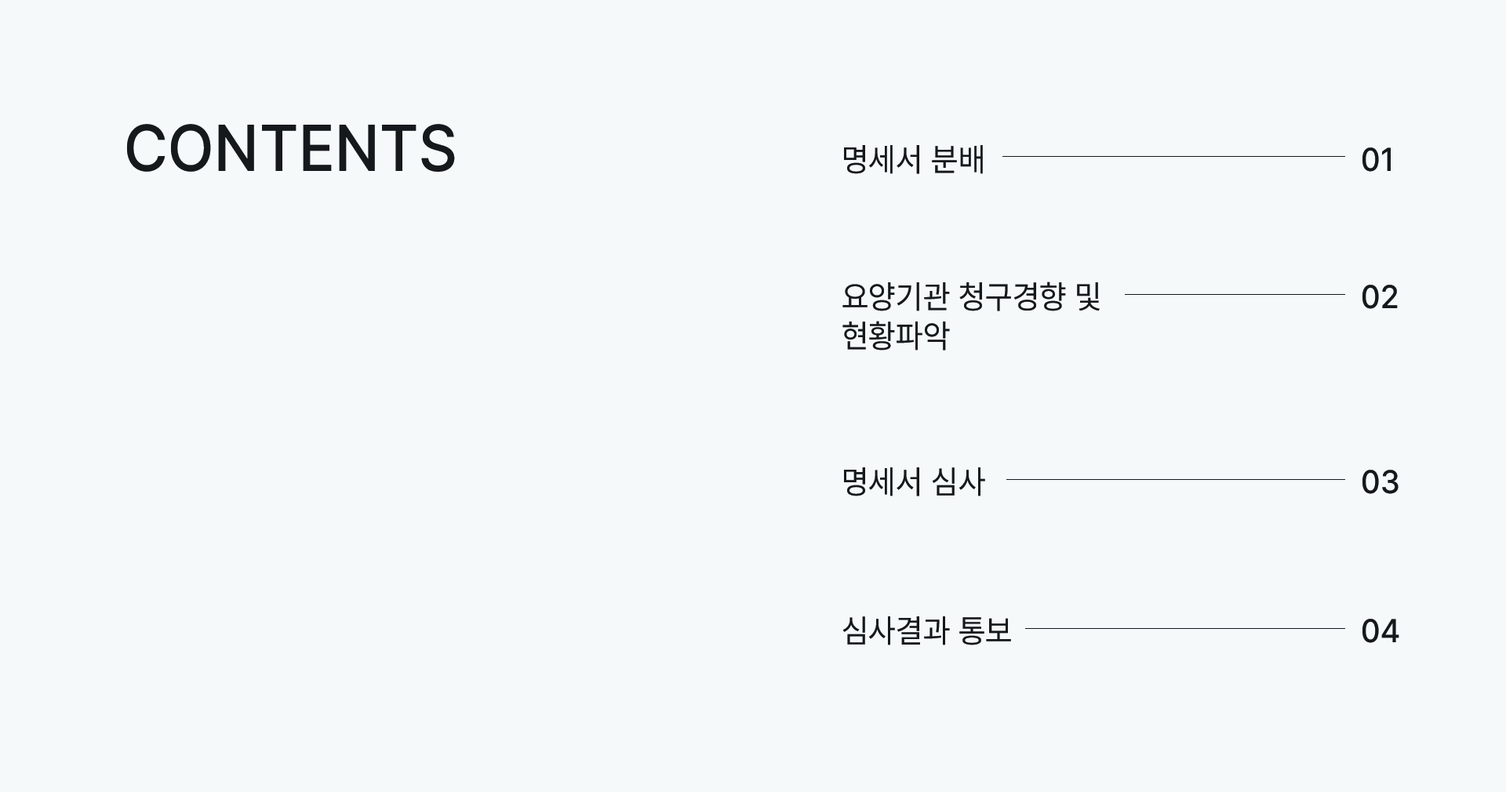
<style>
.page{position:relative;width:1506px;height:792px;background:#f6f9f9}
.page>*{position:absolute;margin:0}
.t1{font:65.3px "Pretendard-Medium";letter-spacing:0.01em;color:#14191c;scale:0.95 1}
.t2{font:32.7px "Pretendard-Regular";letter-spacing:0.01em;color:#14191c;scale:0.95 1}
.t3{font:32.7px "Pretendard-Medium";letter-spacing:0.01em;color:#14191c;scale:0.95 1}
</style>
<div class="page">
<p class="t1" style="left:126px;top:124px;width:329px;height:48px">CONTENTS</p>
<p class="t2" style="left:844px;top:145px;width:139px;height:29px">명세서 분배</p>
<p class="t3" style="left:1362px;top:147px;width:28px;height:25px">01</p>
<p class="t2" style="left:842px;top:282px;width:257px;height:69px">요양기관 청구경향 및<br>현황파악</p>
<p class="t3" style="left:1362px;top:285px;width:35px;height:24px">02</p>
<p class="t2" style="left:844px;top:467px;width:141px;height:29px">명세서 심사</p>
<p class="t3" style="left:1362px;top:470px;width:36px;height:24px">03</p>
<p class="t2" style="left:842px;top:616px;width:169px;height:29px">심사결과 통보</p>
<p class="t3" style="left:1362px;top:619px;width:37px;height:24px">04</p>
</div>
